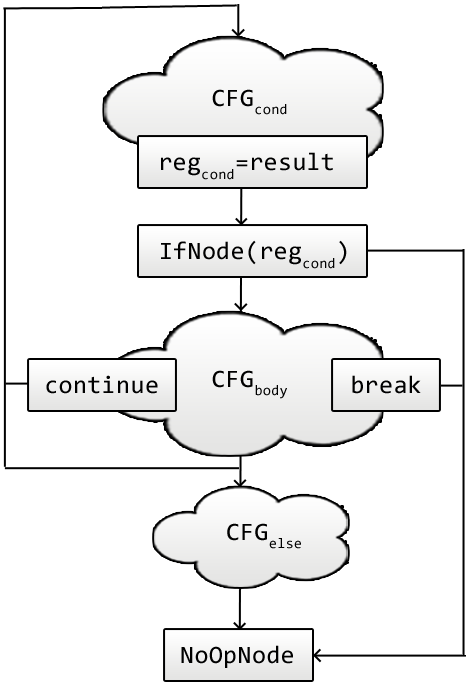
<style>
.page{position:relative;width:469px;height:689px;background:#ffffff}
.page>*{position:absolute;margin:0}
.t1{font:25px "Consolas";letter-spacing:0.025em;color:#000000}
</style>
<div class="page">
<p class="t1" style="left:212px;top:89px;width:75px;height:26px">CFGcond</p>
<p class="t1" style="left:161px;top:152px;width:172px;height:28px">regcond=result</p>
<p class="t1" style="left:161px;top:240px;width:186px;height:29px">IfNode(regcond)</p>
<p class="t1" style="left:46px;top:375px;width:112px;height:19px">continue</p>
<p class="t1" style="left:212px;top:370px;width:75px;height:29px">CFGbody</p>
<p class="t1" style="left:352px;top:375px;width:69px;height:19px">break</p>
<p class="t1" style="left:227px;top:523px;width:74px;height:26px">CFGelse</p>
<p class="t1" style="left:181px;top:645px;width:112px;height:23px">NoOpNode</p>
</div>
